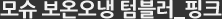
<style>
.page{position:relative;width:222px;height:19px;background:#333333}
.page>*{position:absolute;margin:0}
.t1{font:20px "NanumGothicExtraBold";letter-spacing:-0.03em;color:#f2f2f2}
</style>
<div class="page">
<p class="t1" style="left:0px;top:0px;width:222px;height:19px">모슈 보온오냉 텀블러_핑크</p>
</div>
